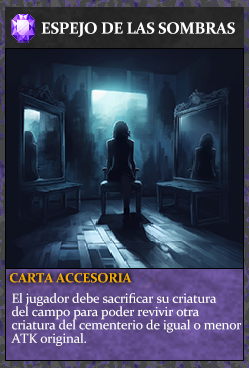
<style>
.page{position:relative;width:249px;height:368px}
.page>*{position:absolute;margin:0}
.t1{font:16px "Constantia-Bold";letter-spacing:-0.02em;color:#ffffff}
.t2{font:13.3px "Constantia-Bold";letter-spacing:-0.02em;color:#f2ac05}
.t3{font:13.3px/13.3px "Constantia";letter-spacing:-0.02em;color:#ffffff}
</style>
<div class="page">
<p class="t1" style="left:41px;top:22px;width:194px;height:15px">ESPEJO DE LAS SOMBRAS</p>
<p class="t2" style="left:10px;top:273px;width:122px;height:10px">CARTA ACCESORIA</p>
<p class="t3" style="left:11px;top:293px;width:231px;height:53px">El jugador debe sacrificar su criatura<br>del campo para poder revivir otra <br>criatura del cementerio de igual o menor<br>ATK original.</p>
</div>
